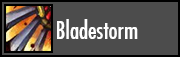
<style>
.page{position:relative;width:180px;height:57px;background:#4c4c4c}
.page>*{position:absolute;margin:0}
.t1{font:24px "FuturaCondensed";color:#ffffff}
</style>
<div class="page">
<p class="t1" style="left:57px;top:19px;width:81px;height:20px">Bladestorm</p>
</div>
